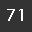
<style>
.page{position:relative;width:32px;height:32px;background:#333333}
.page>*{position:absolute;margin:0}
.t1{font:17.8px "MyriadPro-Regular";color:#ffffff;scale:1.12 1}
</style>
<div class="page">
<p class="t1" style="left:7px;top:9px;width:16px;height:12px">71</p>
</div>
